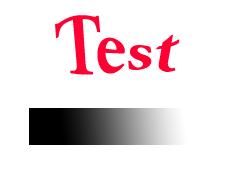
<style>
.page{position:relative;width:240px;height:180px;background:#ffffff}
.page>*{position:absolute;margin:0}
.t1{font:72px "Minion-Bold";color:#ff0033}
</style>
<div class="page">
<p class="t1" style="left:55px;top:15px;width:125px;height:60px">Test</p>
</div>
